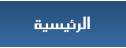
<style>
.page{position:relative;width:126px;height:48px}
.page>*{position:absolute;margin:0}
.t1{font:20px "SC_KHALID";color:#ffffff;scale:1.07 1}
</style>
<div class="page">
<p class="t1" style="left:34px;top:16px;width:56px;height:17px">الرئيسية</p>
</div>
